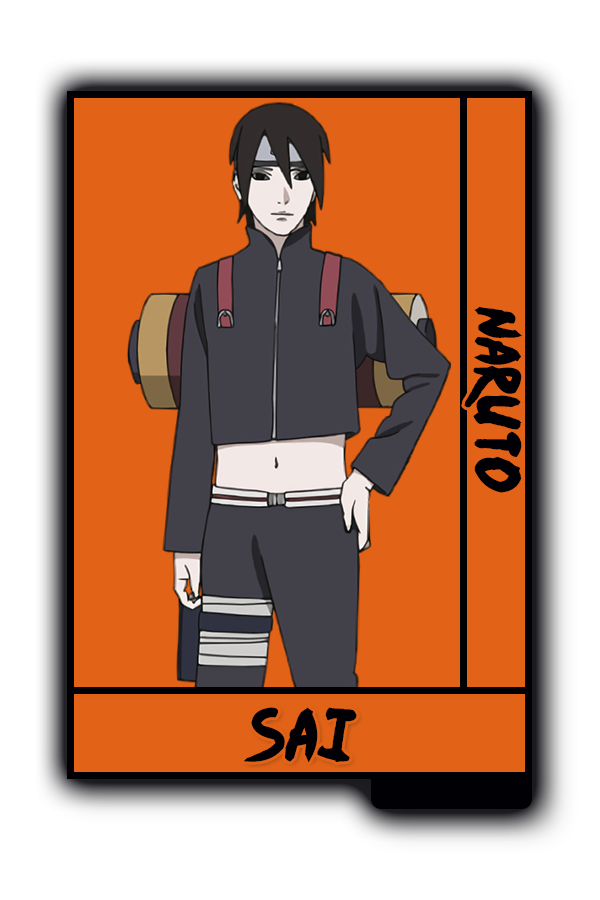
<style>
.page{position:relative;width:600px;height:900px;background:#e26317}
.page>*{position:absolute;margin:0}
.t1{font:52px "Ninja-Naruto";color:#010005}
.t2{font:60.3px "Ninja-Naruto";color:#010005}
</style>
<div class="page">
<p class="t1" style="left:464px;top:307px;width:59px;height:186px;rotate:90deg">Naruto</p>
<p class="t2" style="left:243px;top:707px;width:114px;height:56px">Sai</p>
</div>
